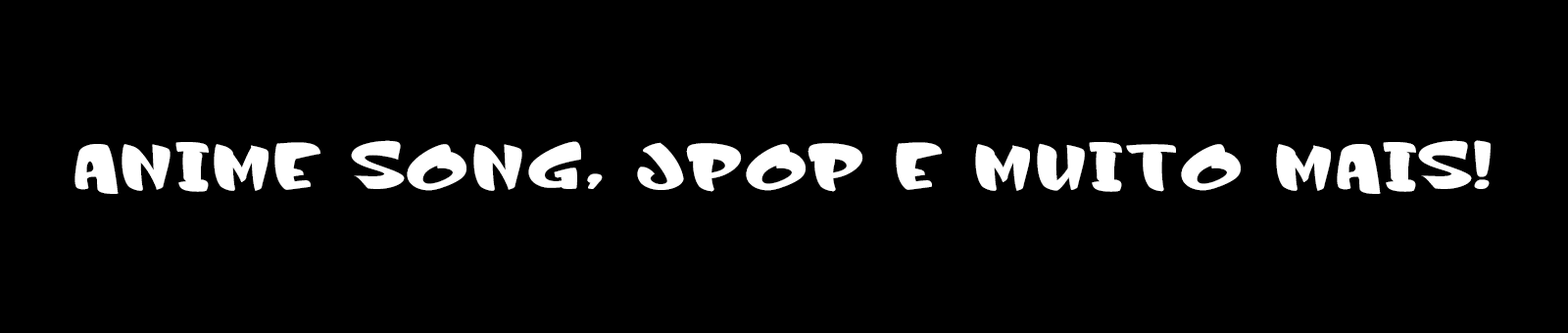
<style>
.page{position:relative;width:1568px;height:333px;background:#000000}
.page>*{position:absolute;margin:0}
.t1{font:68.6px "JoeMaxRegular";color:#ffffff}
</style>
<div class="page">
<p class="t1" style="left:74px;top:140px;width:1417px;height:54px">ANIME SONG, JPOP E MUITO MAIS!</p>
</div>
